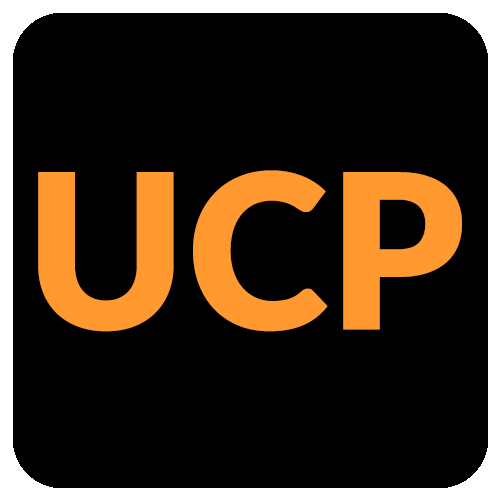
<style>
.page{position:relative;width:500px;height:500px;background:#000000}
.page>*{position:absolute;margin:0}
.t1{font:215.7px "Lato-Black";color:#ff9930}
</style>
<div class="page">
<p class="t1" style="left:38px;top:170px;width:424px;height:162px">UCP</p>
</div>
